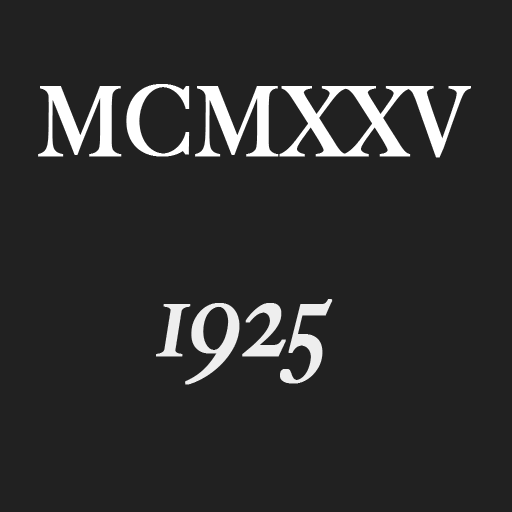
<style>
.page{position:relative;width:512px;height:512px;background:#212121}
.page>*{position:absolute;margin:0}
.t1{font:96px "BigCaslon-Medium";color:#ffffff;font-weight:bold;scale:0.9 1}
.t2{font:108px "BigCaslon-Medium";color:#ffffff;font-weight:bold;font-style:italic;scale:0.9 1}
</style>
<div class="page">
<p class="t1" style="left:38px;top:84px;width:433px;height:74px">MCMXXV</p>
<p class="t2" style="left:156px;top:299px;width:177px;height:86px;opacity:0.92">1925</p>
</div>
